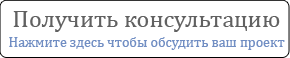
<style>
.page{position:relative;width:290px;height:58px;background:#ffffff}
.page>*{position:absolute;margin:0}
.t1{font:24px "Cambria";color:#616161}
.t2{font:14px "Cambria";color:#718ec3}
</style>
<div class="page">
<p class="t1" style="left:13px;top:11px;width:267px;height:21px">Получить консультацию</p>
<p class="t2" style="left:9px;top:37px;width:276px;height:13px">Нажмите здесь чтобы обсудить ваш проект</p>
</div>
